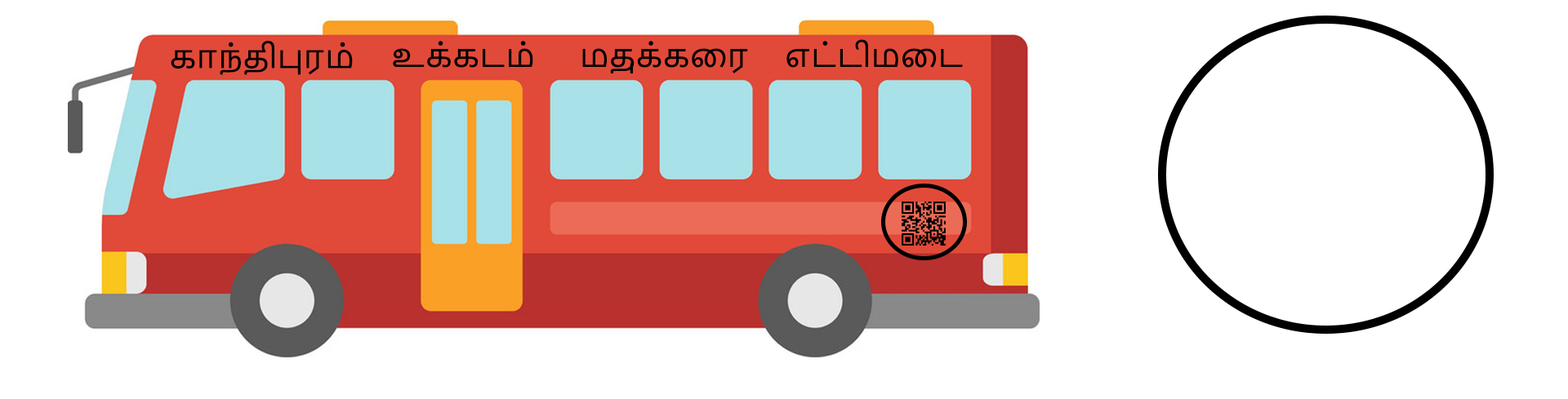
<style>
.page{position:relative;width:1568px;height:399px;background:#ffffff}
.page>*{position:absolute;margin:0}
.t1{font:30.6px "NirmalaUI";color:#000000}
</style>
<div class="page">
<p class="t1" style="left:171px;top:41px;width:182px;height:34px">காந்திபுரம்</p>
<p class="t1" style="left:393px;top:41px;width:140px;height:27px">உக்கடம்</p>
<p class="t1" style="left:582px;top:41px;width:166px;height:33px">மதுக்கைர</p>
<p class="t1" style="left:786px;top:39px;width:177px;height:29px">எட்டிமைட</p>
</div>
